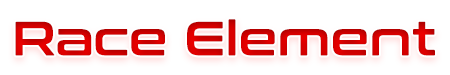
<style>
.page{position:relative;width:450px;height:75px;background:#ffffff}
.page>*{position:absolute;margin:0}
.t1{font:48px "ConthraxSb-Regular";letter-spacing:0.01em;color:#d20000}
</style>
<div class="page">
<p class="t1" style="left:15px;top:19px;width:420px;height:37px">Race Element</p>
</div>
